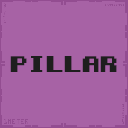
<style>
.page{position:relative;width:128px;height:128px;background:#a762a5}
.page>*{position:absolute;margin:0}
.t1{font:23px "KemcoPixelBold";color:#1e1e1e}
</style>
<div class="page">
<p class="t1" style="left:10px;top:56px;width:107px;height:16px">Pillar</p>
</div>
